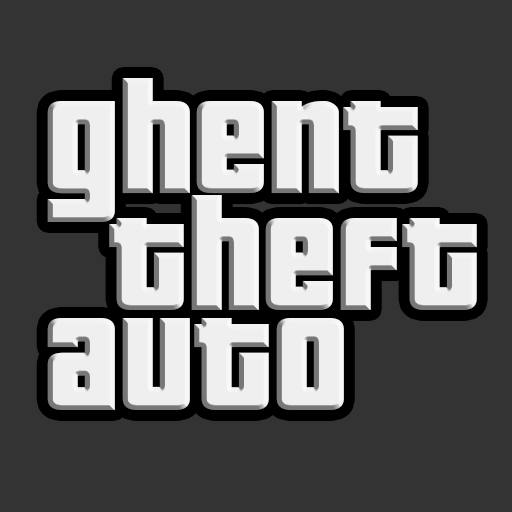
<style>
.page{position:relative;width:512px;height:512px;background:#333333}
.page>*{position:absolute;margin:0}
.t1{font:181px/117px "Pricedown";color:#efefef}
.t2{font:181px/100px "Pricedown";color:#efefef}
</style>
<div class="page">
<p class="t1" style="left:47px;top:78px;width:430px;height:332px;text-align:right">ghent<br>  theft<br><span class="t2">auto</span></p>
</div>
